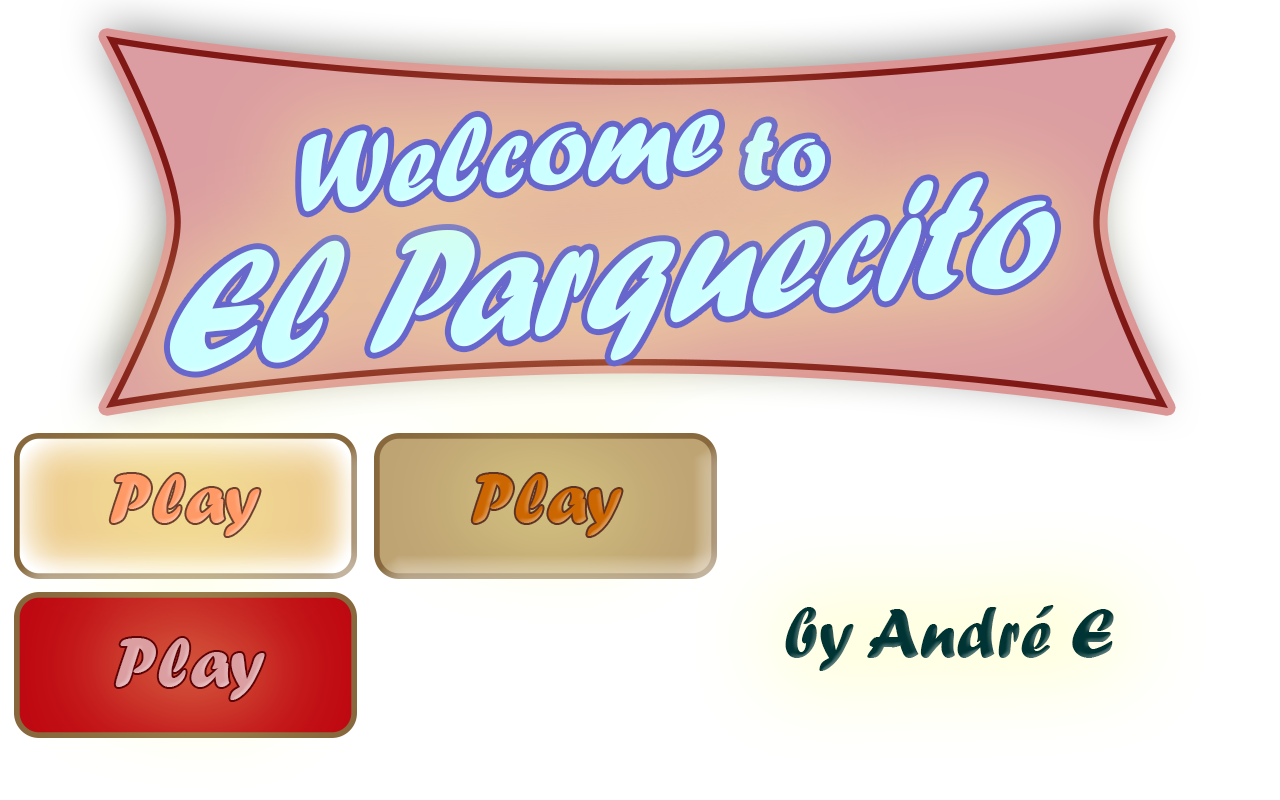
<style>
.page{position:relative;width:1280px;height:800px;background:#ffffff}
.page>*{position:absolute;margin:0}
.t1{font:114.3px "ForteMT";color:#ccffff}
.t2{font:95.8px "ForteMT";color:#ccffff}
.t3{font:180.3px "ForteMT";color:#ccffff;scale:0.86 1}
.t4{font:72px "ForteMT";color:#ff9966}
.t5{font:72px "ForteMT";color:#cc6600}
.t6{font:72px "ForteMT";color:#003333}
.t7{font:72px "ForteMT";color:#db9ea1}
</style>
<div class="page">
<p class="t1" style="left:301px;top:114px;width:418px;height:98px;rotate:-6deg">Welcome</p>
<p class="t2" style="left:744px;top:122px;width:81px;height:64px;rotate:-1deg">to</p>
<p class="t3" style="left:169px;top:177px;width:886px;height:195px;rotate:-6deg">El Parquecito</p>
<p class="t4" style="left:110px;top:474px;width:150px;height:62px">Play</p>
<p class="t5" style="left:472px;top:474px;width:150px;height:62px">Play</p>
<p class="t6" style="left:785px;top:605px;width:329px;height:66px">by André E</p>
<p class="t7" style="left:115px;top:638px;width:150px;height:62px">Play</p>
</div>
